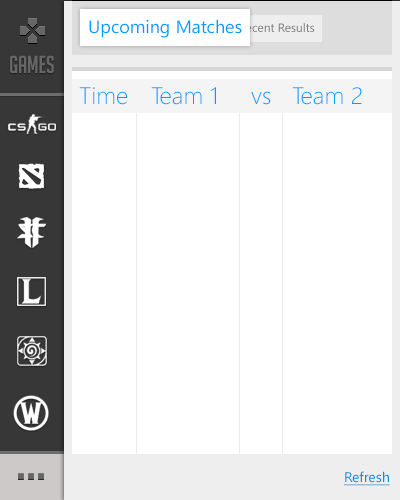
<style>
.page{position:relative;width:400px;height:500px;background:#ffffff}
.page>*{position:absolute;margin:0}
.t1{font:18px "SegoeUI";color:#009cff}
.t2{font:12px "SegoeUI";color:#787878}
.t3{font:24px "BigNoodleTitling";color:#666666}
.t4{font:24px "SegoeUI-Light";color:#009cff}
.t5{font:14px "SegoeUI";color:#008fe9;text-decoration:underline}
</style>
<div class="page">
<p class="t1" style="left:89px;top:19px;width:153px;height:19px">Upcoming Matches</p>
<p class="t2" style="left:239px;top:23px;width:76px;height:9px">Recent Results</p>
<p class="t3" style="left:10px;top:55px;width:44px;height:18px">games</p>
<p class="t4" style="left:79px;top:87px;width:49px;height:18px">Time</p>
<p class="t4" style="left:151px;top:87px;width:65px;height:18px">Team 1</p>
<p class="t4" style="left:292px;top:87px;width:70px;height:18px">Team 2</p>
<p class="t4" style="left:251px;top:91px;width:20px;height:14px">vs</p>
<p class="t5" style="left:344px;top:471px;width:46px;height:15px">Refresh</p>
</div>
